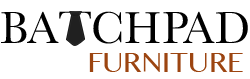
<style>
.page{position:relative;width:250px;height:79px;background:#ffffff}
.page>*{position:absolute;margin:0}
.t1{font:46.6px "Baskerville";color:#000000}
.t2{font:41px "Baskerville";color:#202020;scale:1.19 1}
.t3{font:28.2px "GurmukhiMN";color:#9c4511}
</style>
<div class="page">
<p class="t1" style="left:1px;top:11px;width:58px;height:32px">BA</p>
<p class="t2" style="left:59px;top:11px;width:32px;height:28px">T</p>
<p class="t1" style="left:93px;top:11px;width:155px;height:33px">CHPAD</p>
<p class="t3" style="left:89px;top:53px;width:154px;height:19px">FURNITURE</p>
</div>
